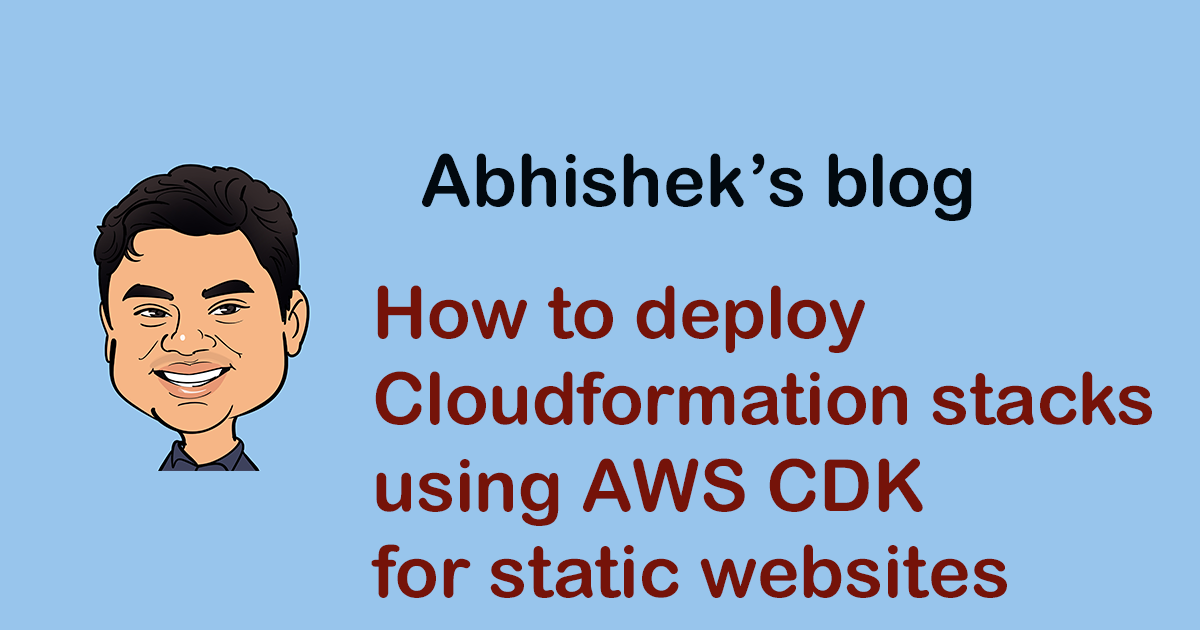
<style>
.page{position:relative;width:1200px;height:630px;background:#98c5ec}
.page>*{position:absolute;margin:0}
.t1{font:72px "ArialRoundedMTBold";color:#02090f}
.t2{font:72px "ArialRoundedMTBold";color:#751309}
</style>
<div class="page">
<p class="t1" style="left:422px;top:153px;width:550px;height:68px">Abhishek’s blog</p>
<p class="t2" style="left:371px;top:285px;width:781px;height:313px">How to deploy <br>Cloudformation stacks <br>using AWS CDK <br>for static websites</p>
</div>
